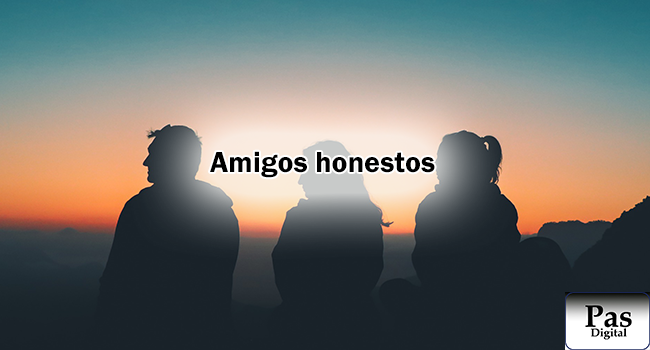
<style>
.page{position:relative;width:650px;height:350px}
.page>*{position:absolute;margin:0}
.t1{font:30px "FranklinGothic-Demi";color:#000000}
</style>
<div class="page">
<p class="t1" style="left:210px;top:151px;width:225px;height:27px">Amigos honestos</p>
</div>
